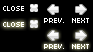
<style>
.page{position:relative;width:93px;height:52px;background:#000000}
.page>*{position:absolute;margin:0}
.t1{font:8px "04b03";color:#ffffff}
</style>
<div class="page">
<p class="t1" style="left:3px;top:6px;width:21px;height:5px">CLOSE</p>
<p class="t1" style="left:3px;top:22px;width:21px;height:5px">CLOSE</p>
<p class="t1" style="left:44px;top:18px;width:20px;height:5px">PREV.</p>
<p class="t1" style="left:72px;top:18px;width:17px;height:5px">NEXT</p>
<p class="t1" style="left:44px;top:44px;width:20px;height:5px">PREV.</p>
<p class="t1" style="left:72px;top:44px;width:17px;height:5px">NEXT</p>
</div>
